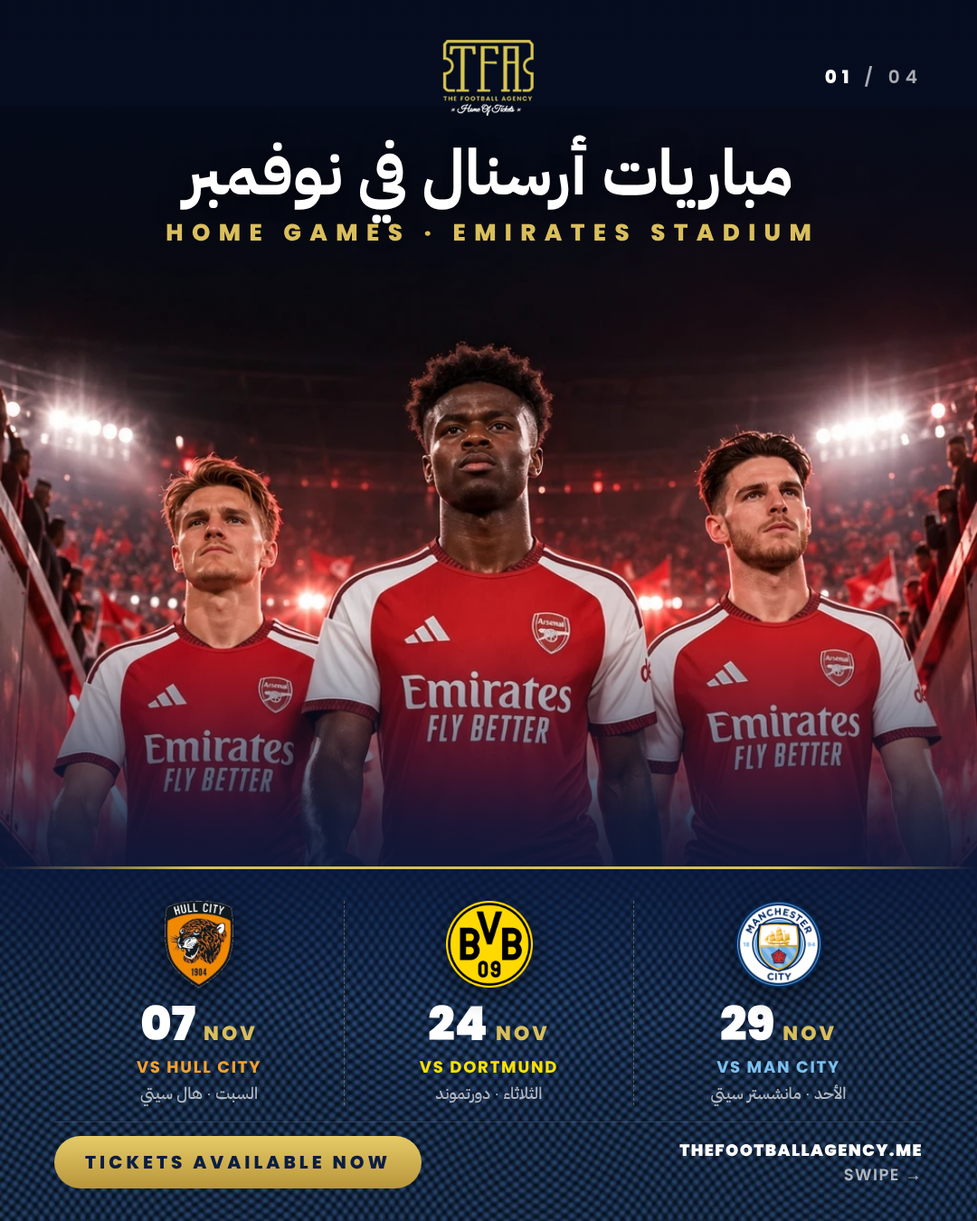
<style>
.page{position:relative;width:977px;height:1221px}
.page>*{position:absolute;margin:0}
.t1{font:18.1px "Poppins-SemiBold";letter-spacing:0.3em;color:#ffffff}
.t2{font:18.1px "Poppins-ExtraBold";letter-spacing:0.3em;color:#ffffff}
.t3{font:63.3px/76px "IBMPlexSansArabic-Bold";color:#ffffff}
.t4{font:23.5px "Poppins-ExtraBold";letter-spacing:0.36em;color:#d9be5c}
.t5{font:19.9px/47px "Poppins-ExtraBold";letter-spacing:0.14em;color:#d9be5c}
.t6{font:47px/47px "Poppins-Black";color:#ffffff}
.t7{font:16.3px "Poppins-Bold";letter-spacing:0.1em;color:#f5a12d}
.t8{font:16.3px "Poppins-Bold";letter-spacing:0.1em;color:#fde100}
.t9{font:16.3px "Poppins-Bold";letter-spacing:0.1em;color:#7cc0ee}
.t10{font:16.3px "IBMPlexSansArabic-Medium"}
.t11{font:16.3px/24.4px "Poppins-Black";letter-spacing:0.08em;color:#ffffff}
.t12{font:16.3px/24.4px "Poppins-SemiBold";letter-spacing:0.08em;color:#ffffff}
.t13{font:18.1px "Poppins-ExtraBold";letter-spacing:0.2em;color:#0b1d44}
</style>
<div class="page">
<p class="t1" style="left:825px;top:66px;width:92px;height:21px"><span class="t2">01</span> / 04</p>
<p class="t3" style="left:156px;top:115px;width:659px;height:136px;text-align:center">مباريات أرسنال في نوفمبر</p>
<p class="t4" style="left:166px;top:223px;width:644px;height:18px">HOME GAMES · EMIRATES STADIUM</p>
<p class="t5" style="left:141px;top:1005px;width:114px;height:36px;text-align:center"><span class="t6">07</span><br>NOV</p>
<p class="t5" style="left:429px;top:1005px;width:118px;height:36px;text-align:center"><span class="t6">24</span><br>NOV</p>
<p class="t5" style="left:721px;top:1005px;width:113px;height:36px;text-align:center"><span class="t6">29</span><br>NOV</p>
<p class="t7" style="left:137px;top:1061px;width:123px;height:12px">VS HULL CITY</p>
<p class="t8" style="left:419px;top:1061px;width:137px;height:12px">VS DORTMUND</p>
<p class="t9" style="left:716px;top:1061px;width:122px;height:12px">VS MAN CITY</p>
<p class="t10" style="left:711px;top:1084px;width:135px;height:22px">الأحد · مانشستر سيتي</p>
<p class="t10" style="left:140px;top:1086px;width:117px;height:20px">السبت · هال سيتي</p>
<p class="t10" style="left:436px;top:1086px;width:106px;height:17px">الثلاثاء · دورتموند</p>
<p class="t11" style="left:679px;top:1144px;width:242px;height:37px;text-align:right">THEFOOTBALLAGENCY.ME<span class="t12"><br>SWIPE →</span></p>
<p class="t13" style="left:85px;top:1155px;width:302px;height:14px">TICKETS AVAILABLE NOW</p>
</div>
